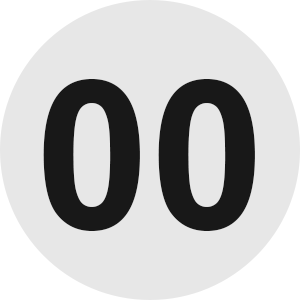
<style>
.page{position:relative;width:300px;height:300px;background:#e7e7e7}
.page>*{position:absolute;margin:0}
.t1{font:207.4px "Arial-BoldMT";color:#181818}
</style>
<div class="page">
<p class="t1" style="left:43px;top:79px;width:212px;height:152px">00</p>
</div>
